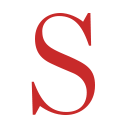
<style>
.page{position:relative;width:128px;height:128px;background:#ffffff}
.page>*{position:absolute;margin:0}
.t1{font:144px "MillerDisplay-Light";letter-spacing:0.2em;color:#c82a2a}
</style>
<div class="page">
<p class="t1" style="left:31px;top:13px;width:64px;height:102px">S</p>
</div>
